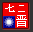
<style>
.page{position:relative;width:33px;height:32px;background:#f20000}
.page>*{position:absolute;margin:0}
.t1{font:10.4px "SimSun";color:#ffffff}
.t2{font:11.7px "SimSun";color:#ffffff}
</style>
<div class="page">
<p class="t1" style="left:5px;top:4px;width:20px;height:8px">七二</p>
<p class="t2" style="left:16px;top:15px;width:11px;height:12px">晋</p>
</div>
